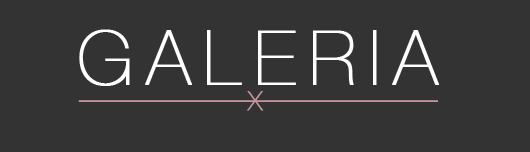
<style>
.page{position:relative;width:530px;height:152px;background:#333333}
.page>*{position:absolute;margin:0}
.t1{font:74.6px "HelveticaNeue-UltraLight";letter-spacing:0.17em;color:#ffffff;text-transform:uppercase;font-weight:bold}
.t2{font:26px "HelveticaNeue-UltraLight";letter-spacing:0.17em;color:#c5959a;text-transform:uppercase;font-weight:bold}
</style>
<div class="page">
<p class="t1" style="left:79px;top:29px;width:360px;height:57px">galeria</p>
<p class="t2" style="left:247px;top:91px;width:17px;height:20px">x</p>
</div>
